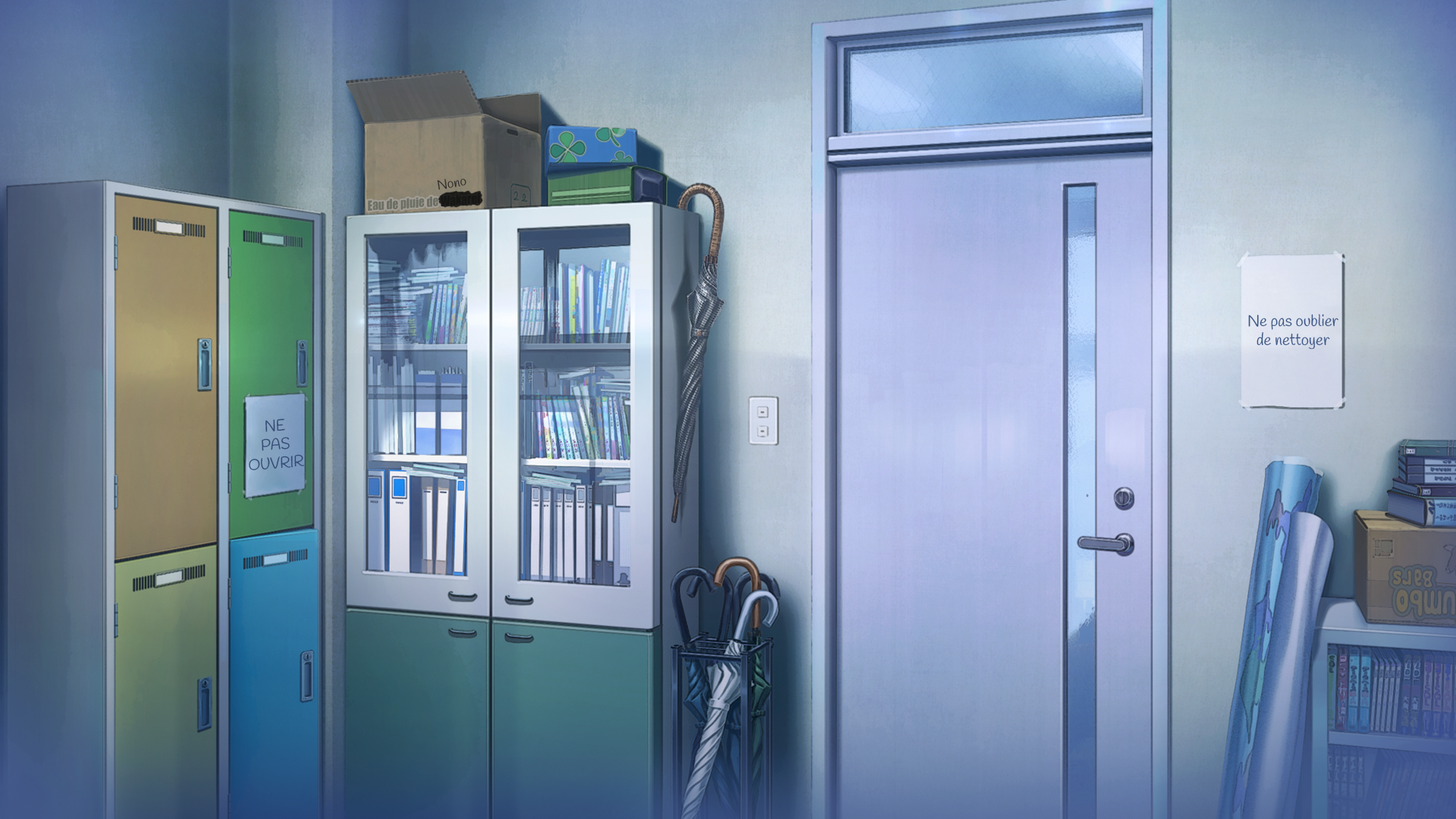
<style>
.page{position:relative;width:1456px;height:819px}
.page>*{position:absolute;margin:0}
.t1{font:13.2px "Handlee-Regular";color:#2e2e2e}
.t2{font:13px "Impact";color:#6d6f65;scale:0.89 1}
.t3{font:15.8px "Handlee-Regular";color:#3b5888}
.t4{font:15.6px "Handlee-Regular";color:#324a74;scale:0.94 1}
</style>
<div class="page">
<p class="t1" style="left:437px;top:178px;width:29px;height:12px;rotate:-8deg">Nono</p>
<p class="t2" style="left:368px;top:193px;width:112px;height:18px;rotate:-4deg">Eau de pluie de Wakarei</p>
<p class="t3" style="left:1248px;top:314px;width:90px;height:36px;text-align:center">Ne pas oublier<br>de nettoyer</p>
<p class="t4" style="left:249px;top:419px;width:56px;height:51px;text-align:center;rotate:-5deg">NE<br>PAS<br>OUVRIR</p>
</div>
